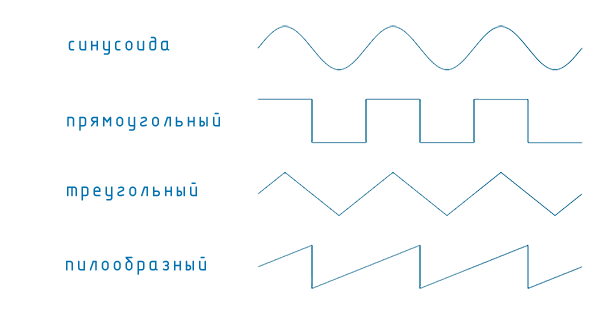
<style>
.page{position:relative;width:600px;height:315px;background:#ffffff}
.page>*{position:absolute;margin:0}
.t1{font:21.6px "ISOCPEUR";letter-spacing:0.1em;color:#0070af}
</style>
<div class="page">
<p class="t1" style="left:68px;top:36px;width:102px;height:19px">синусоида</p>
<p class="t1" style="left:67px;top:112px;width:153px;height:19px">прямоугольный</p>
<p class="t1" style="left:67px;top:182px;width:130px;height:19px">треугольный</p>
<p class="t1" style="left:66px;top:256px;width:140px;height:19px">пилообразный</p>
</div>
